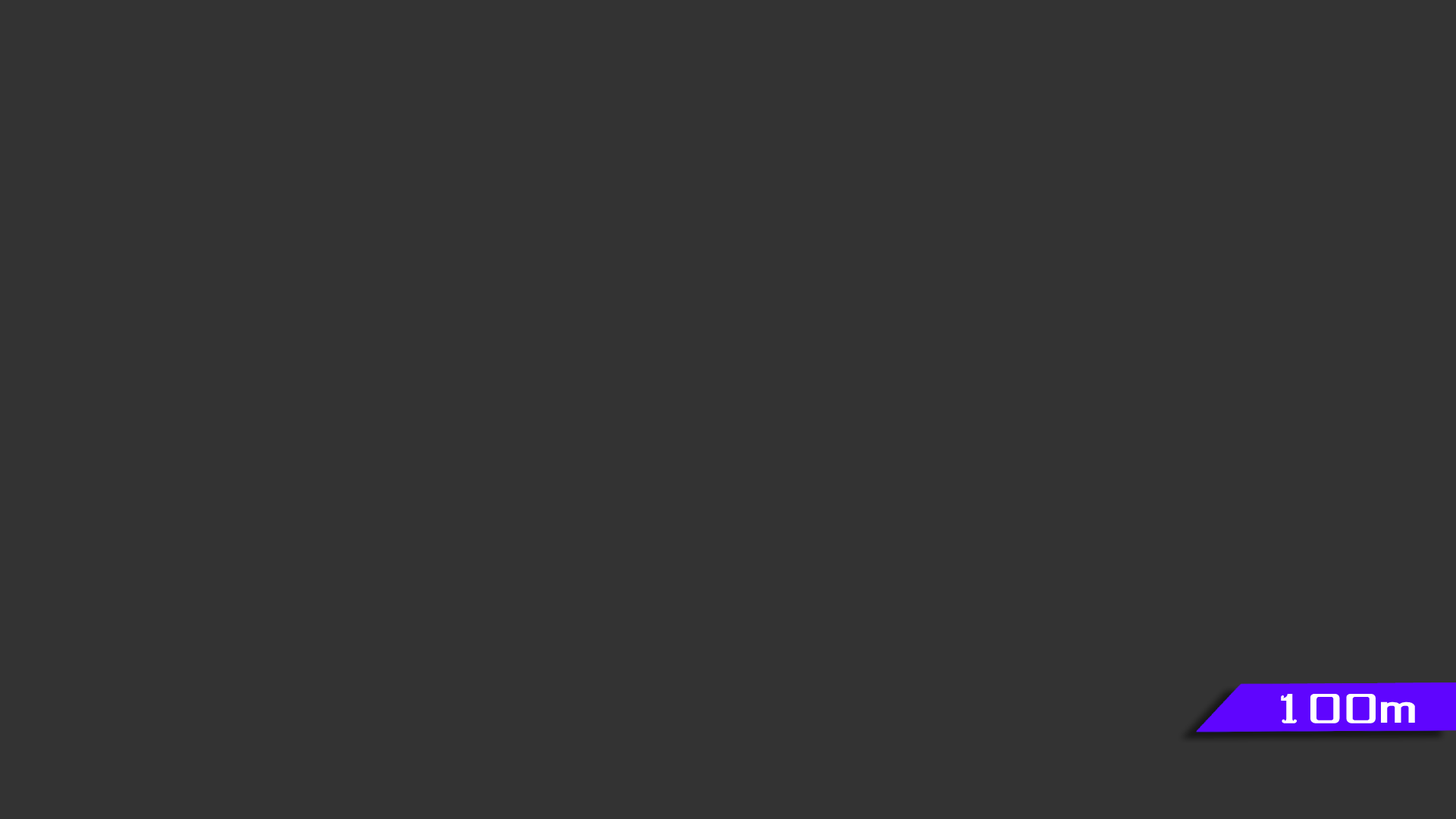
<style>
.page{position:relative;width:1456px;height:819px;background:#333333}
.page>*{position:absolute;margin:0}
.t1{font:57.3px "Dhurjati";color:#ffffff}
</style>
<div class="page">
<p class="t1" style="left:1281px;top:693px;width:134px;height:30px">100m</p>
</div>
